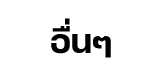
<style>
.page{position:relative;width:160px;height:80px;background:#ffffff}
.page>*{position:absolute;margin:0}
.t1{font:45px "FCMinimalBold";color:#000000}
</style>
<div class="page">
<p class="t1" style="left:51px;top:18px;width:60px;height:40px">อื่นๆ</p>
</div>
